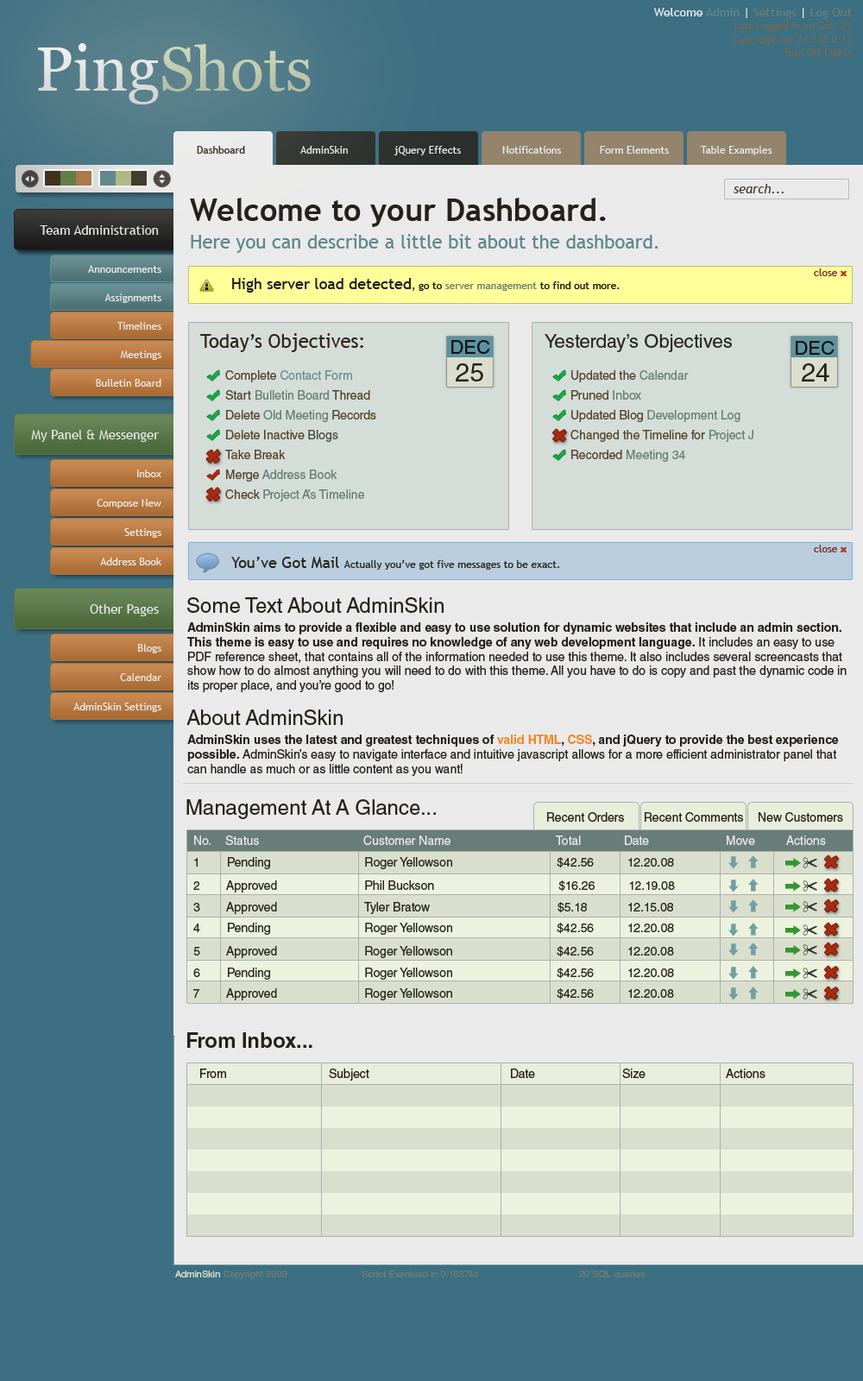
<style>
.page{position:relative;width:863px;height:1381px;background:#3c6f82}
.page>*{position:absolute;margin:0}
.t1{font:10.4px "TrebuchetMS";color:#776954}
.t2{font:12.1px "TrebuchetMS";color:#eaeaea}
.t3{font:12.1px "TrebuchetMS";color:#5e878d}
.t4{font:12.1px "TrebuchetMS";color:#687d77}
.t5{font:62.2px "Georgia";color:#b3c49b}
.t6{font:62.2px "Georgia";color:#eaeaea}
.t7{font:10.4px "TrebuchetMS";color:#25211b}
.t8{font:10.4px "TrebuchetMS";color:#eaeaea}
.t9{font:12.9px "TrebuchetMS-Italic";color:#3f382c}
.t10{font:31.1px "TrebuchetMS-Bold";color:#25211b}
.t11{font:12.9px "TrebuchetMS";color:#eaeaea}
.t12{font:19px "TrebuchetMS";color:#5e878d}
.t13{font:10.4px "TrebuchetMS";color:#772f21}
.t14{font:15.5px "TrebuchetMS";color:#191713}
.t15{font:10.4px "TrebuchetMS";color:#191713}
.t16{font:10.4px "TrebuchetMS";color:#687d77}
.t17{font:19px "TrebuchetMS";color:#2f2517}
.t18{font:19px "HelveticaLTStd-Roman";color:#0b0b0b}
.t19{font:19px "HelveticaLTStd-Roman";color:#25211b}
.t20{font:25.9px "HelveticaLTStd-Roman";color:#25211b}
.t21{font:12.1px/19px "HelveticaLTStd-Roman";color:#55432a}
.t22{font:12.1px/19px "HelveticaLTStd-Roman";color:#678e93}
.t23{font:12.1px/19px "HelveticaLTStd-Roman";color:#687d77}
.t24{font:12.1px/19px "HelveticaLTStd-Roman";color:#484a47}
.t25{font:10.4px "TrebuchetMS";color:#28261c}
.t26{font:15.5px "TrebuchetMS";color:#28261c}
.t27{font:20.7px "HelveticaLTStd-Roman";color:#25211b}
.t28{font:12.1px "HelveticaLTStd-Roman";color:#25211b}
.t29{font:12.1px "HelveticaLTStd-Bold";color:#25211b}
.t30{font:12.1px "HelveticaLTStd-Bold";color:#f28729}
.t31{font:12.1px "HelveticaLTStd-Roman";color:#eaeaea}
.t32{font:12.1px "HelveticaLTStd-Roman";color:#28261c}
.t33{font:20.7px "HelveticaLTStd-Bold";color:#25211b}
.t34{font:9.5px "HelveticaLTStd-Roman";color:#687d77}
.t35{font:9.5px "HelveticaLTStd-Roman";color:#dadfcd}
</style>
<div class="page">
<p class="t1" style="left:654px;top:8px;width:198px;height:50px;text-align:right"><span class="t2">Welcome </span><span class="t3">Admin</span><span class="t2"> | </span><span class="t4">Settings</span><span class="t2"> | </span><span class="t4">Log Out<br></span>Last Logged in on Oct. 21<br>Last login ip: 74.132.0.13<br>Turn Off Lights</p>
<p class="t5" style="left:38px;top:43px;width:273px;height:61px"><span class="t6">Ping</span>Shots</p>
<p class="t7" style="left:197px;top:146px;width:48px;height:8px">Dashboard</p>
<p class="t8" style="left:300px;top:146px;width:48px;height:8px">AdminSkin</p>
<p class="t8" style="left:395px;top:146px;width:66px;height:9px">jQuery Effects</p>
<p class="t8" style="left:502px;top:146px;width:60px;height:8px">Notifications</p>
<p class="t8" style="left:600px;top:146px;width:69px;height:8px">Form Elements</p>
<p class="t8" style="left:701px;top:146px;width:72px;height:9px">Table Examples</p>
<p class="t9" style="left:734px;top:184px;width:50px;height:9px">search...</p>
<p class="t10" style="left:190px;top:198px;width:416px;height:29px">Welcome to your Dashboard.</p>
<p class="t11" style="left:40px;top:225px;width:119px;height:10px">Team Administration</p>
<p class="t12" style="left:191px;top:234px;width:468px;height:19px">Here you can describe a little bit about the dashboard.</p>
<p class="t8" style="left:88px;top:265px;width:73px;height:8px">Announcements</p>
<p class="t13" style="left:814px;top:268px;width:23px;height:8px">close</p>
<p class="t14" style="left:232px;top:278px;width:388px;height:15px">High server load detected<span class="t15">, go to </span><span class="t16">server management</span><span class="t15"> to find out more.</span></p>
<p class="t8" style="left:104px;top:294px;width:57px;height:9px">Assignments</p>
<p class="t8" style="left:117px;top:322px;width:44px;height:8px">Timelines</p>
<p class="t17" style="left:200px;top:333px;width:163px;height:19px">Today’s Objectives:</p>
<p class="t18" style="left:452px;top:340px;width:38px;height:14px">DEC</p>
<p class="t19" style="left:545px;top:334px;width:187px;height:18px">Yesterday’s Objectives</p>
<p class="t18" style="left:796px;top:341px;width:39px;height:14px">DEC</p>
<p class="t8" style="left:120px;top:350px;width:41px;height:10px">Meetings</p>
<p class="t20" style="left:456px;top:363px;width:27px;height:19px">25</p>
<p class="t20" style="left:802px;top:363px;width:28px;height:19px">24</p>
<p class="t21" style="left:225px;top:370px;width:151px;height:132px">Complete <span class="t22">Contact Form<br></span>Start <span class="t23">Bulletin Board</span> Thread<br>Delete <span class="t23">Old Meeting</span> Records<br>Delete Inactive <span class="t24">Blogs<br></span>Take Break<br>Merge <span class="t23">Address Book<br></span>Check <span class="t23">Project A’s Timeline</span></p>
<p class="t21" style="left:571px;top:370px;width:183px;height:92px">Updated the <span class="t23">Calendar<br></span>Pruned <span class="t23">Inbox<br></span>Updated Blog <span class="t23">Development Log<br></span>Changed the Timeline for <span class="t23">Project J<br></span>Recorded <span class="t23">Meeting 34</span></p>
<p class="t8" style="left:96px;top:379px;width:65px;height:8px">Bulletin Board</p>
<p class="t11" style="left:31px;top:430px;width:128px;height:12px">My Panel &amp; Messenger</p>
<p class="t8" style="left:137px;top:470px;width:24px;height:7px">Inbox</p>
<p class="t8" style="left:97px;top:499px;width:64px;height:9px">Compose New</p>
<p class="t8" style="left:124px;top:528px;width:37px;height:10px">Settings</p>
<p class="t13" style="left:814px;top:545px;width:23px;height:8px">close</p>
<p class="t8" style="left:100px;top:558px;width:61px;height:7px">Address Book</p>
<p class="t25" style="left:231px;top:557px;width:328px;height:13px"><span class="t26">You’ve Got Mail </span>Actually you’ve got five messages to be exact.</p>
<p class="t11" style="left:90px;top:604px;width:69px;height:12px">Other Pages</p>
<p class="t27" style="left:187px;top:597px;width:257px;height:16px">Some Text About AdminSkin</p>
<p class="t28" style="left:187px;top:622px;width:660px;height:70px"><span class="t29">AdminSkin aims to provide a flexible and easy to use solution for dynamic websites that include an admin section. This theme is easy to use and requires no knowledge of any web development language.</span> It includes an easy to use PDF reference sheet, that contains all of the information needed to use this theme. It also includes several screencasts that show how to do almost anything you will need to do with this theme. All you have to do is copy and past the dynamic code in its proper place, and you’re good to go!</p>
<p class="t8" style="left:138px;top:644px;width:23px;height:10px">Blogs</p>
<p class="t8" style="left:120px;top:673px;width:41px;height:8px">Calendar</p>
<p class="t8" style="left:73px;top:703px;width:88px;height:9px">AdminSkin Settings</p>
<p class="t27" style="left:186px;top:710px;width:157px;height:15px">About AdminSkin</p>
<p class="t28" style="left:187px;top:735px;width:652px;height:41px"><span class="t29">AdminSkin uses the latest and greatest techniques of </span><span class="t30">valid HTML</span><span class="t29">, </span><span class="t30">CSS</span><span class="t29">, and jQuery to provide the best experience possible.</span> AdminSkin’s easy to navigate interface and intuitive javascript allows for a more efficient administrator panel that can handle as much or as little content as you want!</p>
<p class="t27" style="left:186px;top:799px;width:250px;height:20px">Management At A Glance...</p>
<p class="t28" style="left:547px;top:812px;width:77px;height:10px">Recent Orders</p>
<p class="t28" style="left:645px;top:812px;width:98px;height:10px">Recent Comments</p>
<p class="t28" style="left:759px;top:812px;width:84px;height:10px">New Customers</p>
<p class="t31" style="left:194px;top:836px;width:17px;height:9px">No.</p>
<p class="t31" style="left:225px;top:836px;width:34px;height:9px">Status</p>
<p class="t31" style="left:363px;top:836px;width:88px;height:9px">Customer Name</p>
<p class="t31" style="left:556px;top:836px;width:25px;height:9px">Total</p>
<p class="t31" style="left:625px;top:836px;width:24px;height:9px">Date</p>
<p class="t31" style="left:727px;top:836px;width:28px;height:9px">Move</p>
<p class="t31" style="left:786px;top:836px;width:40px;height:9px">Actions</p>
<p class="t32" style="left:194px;top:857px;width:480px;height:12px">1        Pending                            Roger Yellowson                               $42.56          12.20.08</p>
<p class="t32" style="left:193px;top:881px;width:482px;height:12px">2        Approved                          Phil Buckson                                     $16.26          12.19.08</p>
<p class="t32" style="left:193px;top:902px;width:480px;height:12px">3        Approved                          Tyler Bratow                                      $5.18            12.15.08</p>
<p class="t32" style="left:193px;top:923px;width:481px;height:12px">4        Pending                            Roger Yellowson                               $42.56          12.20.08</p>
<p class="t32" style="left:193px;top:946px;width:481px;height:12px">5        Approved                          Roger Yellowson                               $42.56          12.20.08</p>
<p class="t32" style="left:193px;top:968px;width:481px;height:12px">6        Pending                            Roger Yellowson                               $42.56          12.20.08</p>
<p class="t32" style="left:193px;top:988px;width:481px;height:13px">7        Approved                          Roger Yellowson                               $42.56          12.20.08</p>
<p class="t33" style="left:187px;top:1032px;width:126px;height:16px">From Inbox...</p>
<p class="t28" style="left:200px;top:1069px;width:26px;height:9px">From</p>
<p class="t28" style="left:329px;top:1069px;width:40px;height:12px">Subject</p>
<p class="t28" style="left:511px;top:1069px;width:24px;height:9px">Date</p>
<p class="t28" style="left:622px;top:1069px;width:24px;height:9px">Size</p>
<p class="t28" style="left:726px;top:1069px;width:40px;height:9px">Actions</p>
<p class="t34" style="left:175px;top:1271px;width:471px;height:8px"><span class="t35">AdminSkin </span>Copyright 2009    Script Exectued in 0.18374s    20 SQL queries</p>
</div>
